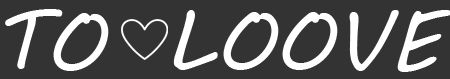
<style>
.page{position:relative;width:450px;height:79px;background:#333333}
.page>*{position:absolute;margin:0}
.t1{font:84px "MVBoli";color:#ffffff}
</style>
<div class="page">
<p class="t1" style="left:5px;top:9px;width:104px;height:62px">TO</p>
<p class="t1" style="left:173px;top:10px;width:279px;height:62px">LOOVE</p>
</div>
